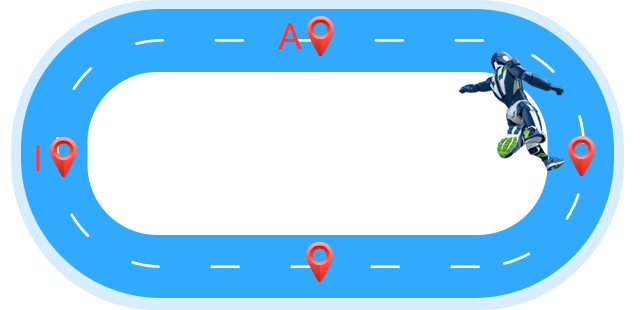
<style>
.page{position:relative;width:640px;height:310px;background:#ffffff}
.page>*{position:absolute;margin:0}
.t1{font:34px "MicrosoftYaHei";color:#ff3636}
</style>
<div class="page">
<p class="t1" style="left:278px;top:23px;width:24px;height:26px">A</p>
<p class="t1" style="left:36px;top:145px;width:4px;height:26px">I</p>
</div>
